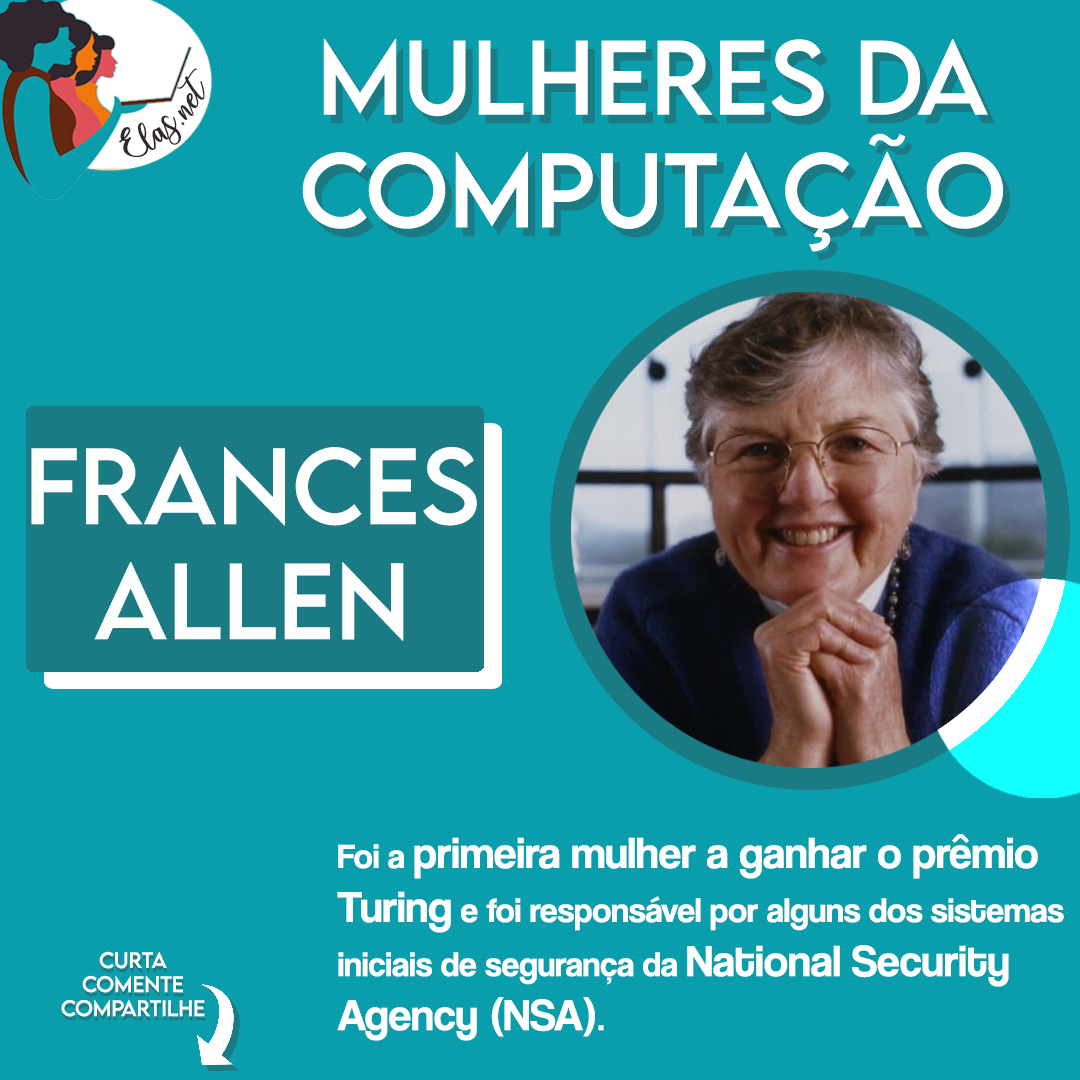
<style>
.page{position:relative;width:1080px;height:1080px;background:#0a9eac}
.page>*{position:absolute;margin:0}
.t1{font:25px "charlinda-Regular";color:#2f262f;scale:1.18 1}
.t2{font:96px "LEMONMILK-Regular";color:#ffffff}
.t3{font:35px "CoolveticaRg-Regular";color:#ffffff}
.t4{font:45px "CoolveticaRg-Regular";color:#ffffff}
.t5{font:20px "LEMONMILK-Regular";color:#ffffff}
</style>
<div class="page">
<p class="t1" style="left:119px;top:68px;width:86px;height:89px;rotate:-43deg">Elas.net</p>
<p class="t2" style="left:31px;top:446px;width:446px;height:195px;text-align:center">Frances<br>Allen</p>
<p class="t3" style="left:337px;top:834px;width:727px;height:207px">Foi a <span class="t4">primeira mulher a ganhar o prêmio <br>Turing</span> e foi responsável por alguns dos sistemas <br>iniciais de segurança da <span class="t4">National Security <br>Agency (NSA)</span>.</p>
<p class="t5" style="left:61px;top:951px;width:144px;height:66px;text-align:center">Curta<br>Comente<br>Compartilhe</p>
</div>
